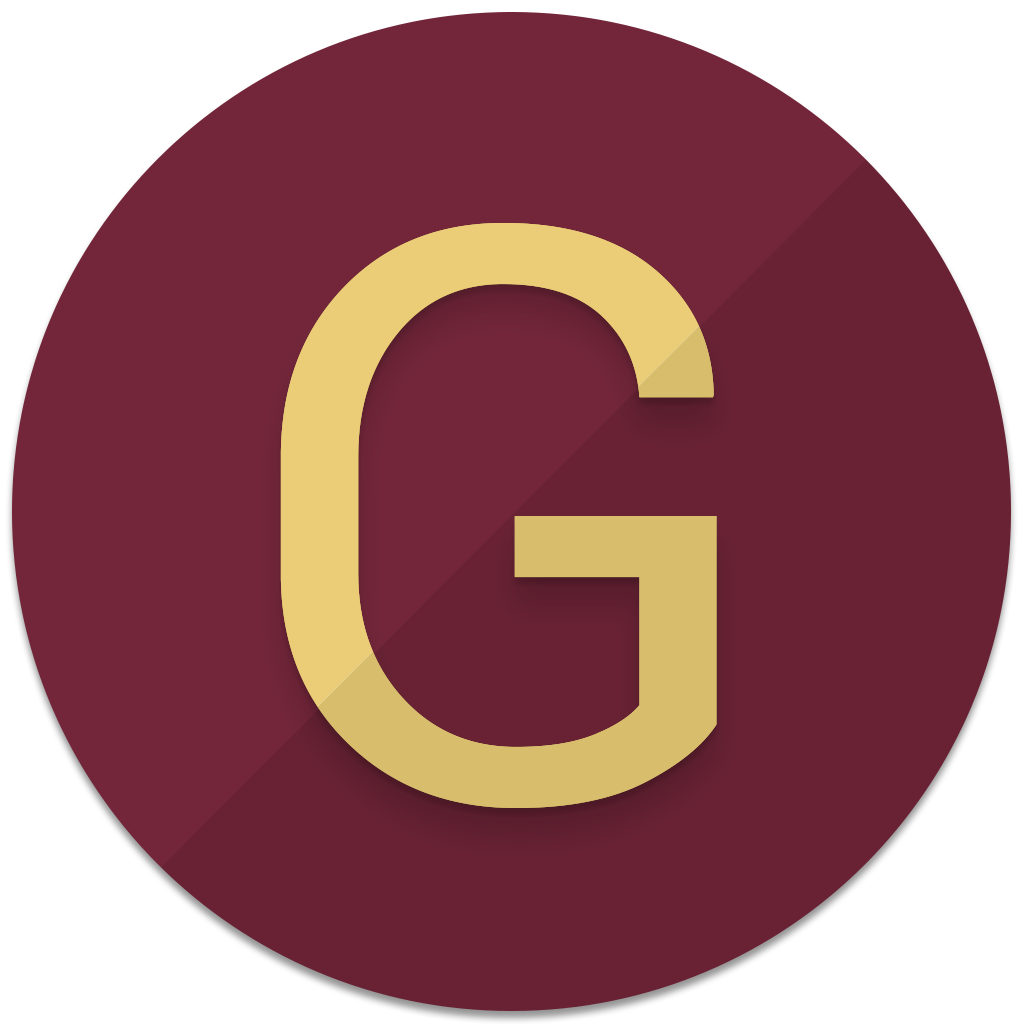
<style>
.page{position:relative;width:1024px;height:1024px;background:#73263a}
.page>*{position:absolute;margin:0}
.t1{font:800px "Roboto-Regular";color:#ebcd77}
</style>
<div class="page">
<p class="t1" style="left:280px;top:223px;width:437px;height:585px">G</p>
<p class="t1" style="left:280px;top:223px;width:437px;height:585px">G</p>
</div>
